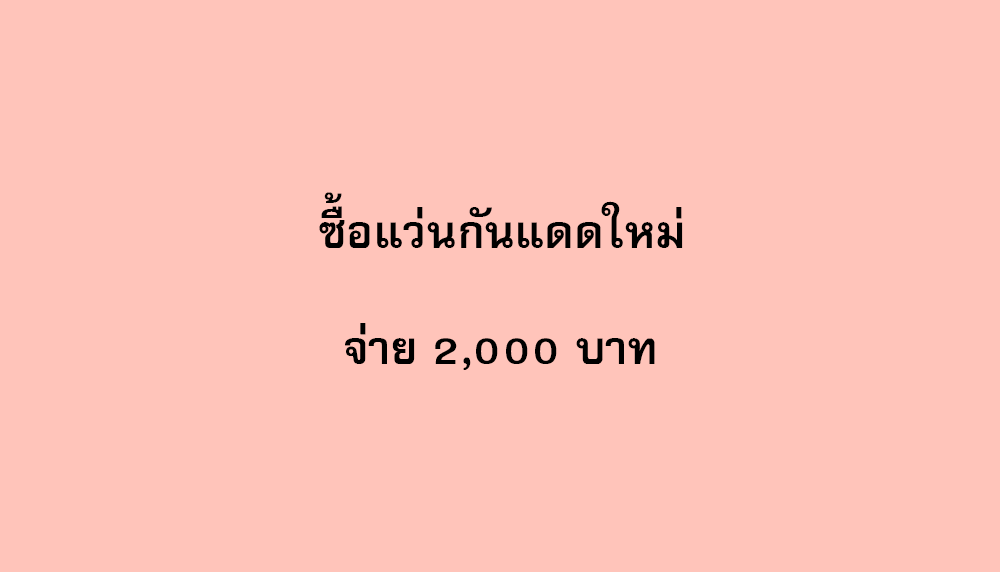
<style>
.page{position:relative;width:1000px;height:572px;background:#ffc4ba}
.page>*{position:absolute;margin:0}
.t1{font:64px "FreesiaUPCBold";color:#000000}
</style>
<div class="page">
<p class="t1" style="left:319px;top:192px;width:364px;height:56px">ซื้อแว่นกันแดดใหม่</p>
<p class="t1" style="left:345px;top:323px;width:310px;height:47px">จ่าย 2,000 บาท</p>
</div>
